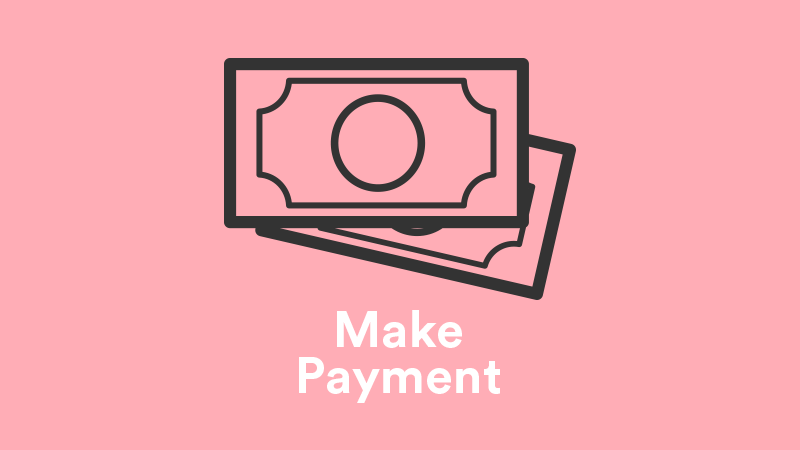
<style>
.page{position:relative;width:800px;height:450px;background:#ffadb6}
.page>*{position:absolute;margin:0}
.t1{font:50.7px/46.7px "CircularStd-Bold";color:#ffffff}
</style>
<div class="page">
<p class="t1" style="left:299px;top:310px;width:201px;height:93px;text-align:center">Make<br>Payment</p>
</div>
